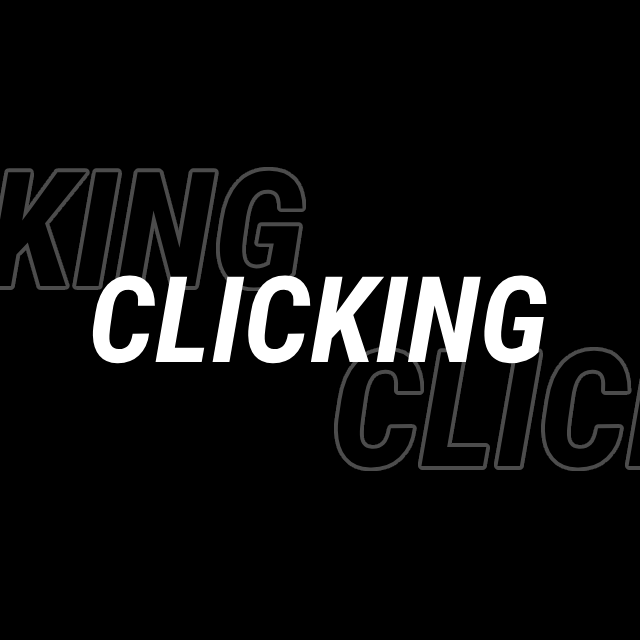
<style>
.page{position:relative;width:640px;height:640px;background:#000000}
.page>*{position:absolute;margin:0}
.t1{font:120px "RobotoCondensed-BoldItalic";color:#ffffff}
</style>
<div class="page">
<p class="t1" style="left:92px;top:275px;width:455px;height:89px">CLICKING</p>
</div>
